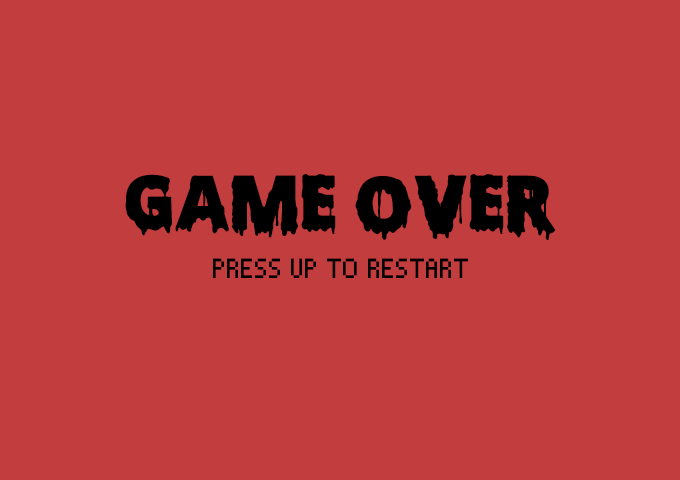
<style>
.page{position:relative;width:680px;height:480px;background:#c23d3d}
.page>*{position:absolute;margin:0}
.t1{font:72px "ScaryHalloweenFont-Bold";color:#000000;text-transform:uppercase}
.t2{font:36px "Pixelade";color:#000000;text-transform:uppercase}
</style>
<div class="page">
<p class="t1" style="left:125px;top:174px;width:430px;height:66px">GAME OVER</p>
<p class="t2" style="left:213px;top:258px;width:255px;height:20px">press up to restart</p>
</div>
